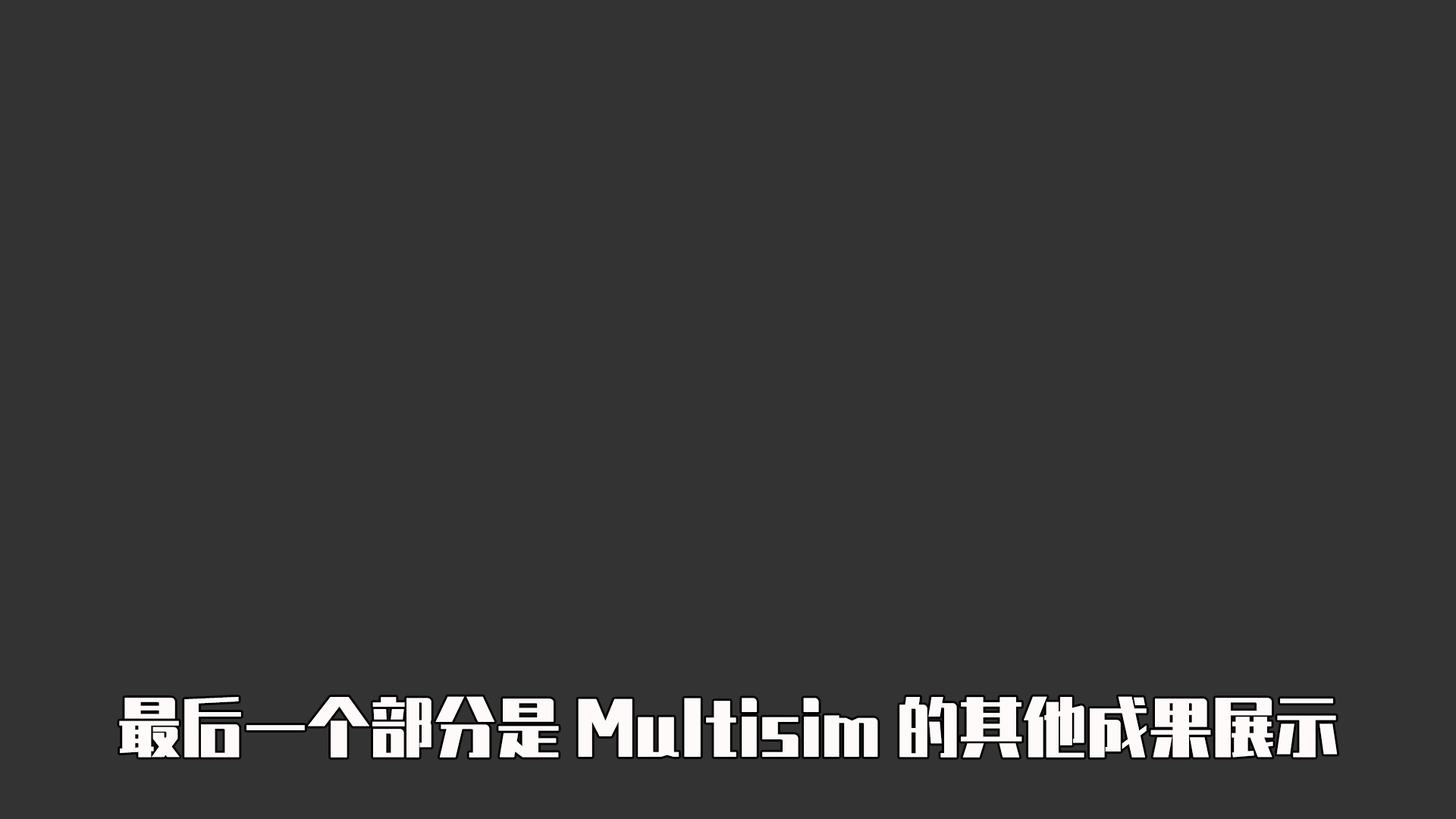
<style>
.page{position:relative;width:1456px;height:819px;background:#333333}
.page>*{position:absolute;margin:0}
.t1{font:63.2px "ZhenyanGB-Regular";color:#fefafa}
</style>
<div class="page">
<p class="t1" style="left:119px;top:696px;width:1219px;height:62px">最后一个部分是Multisim的其他成果展示</p>
</div>
